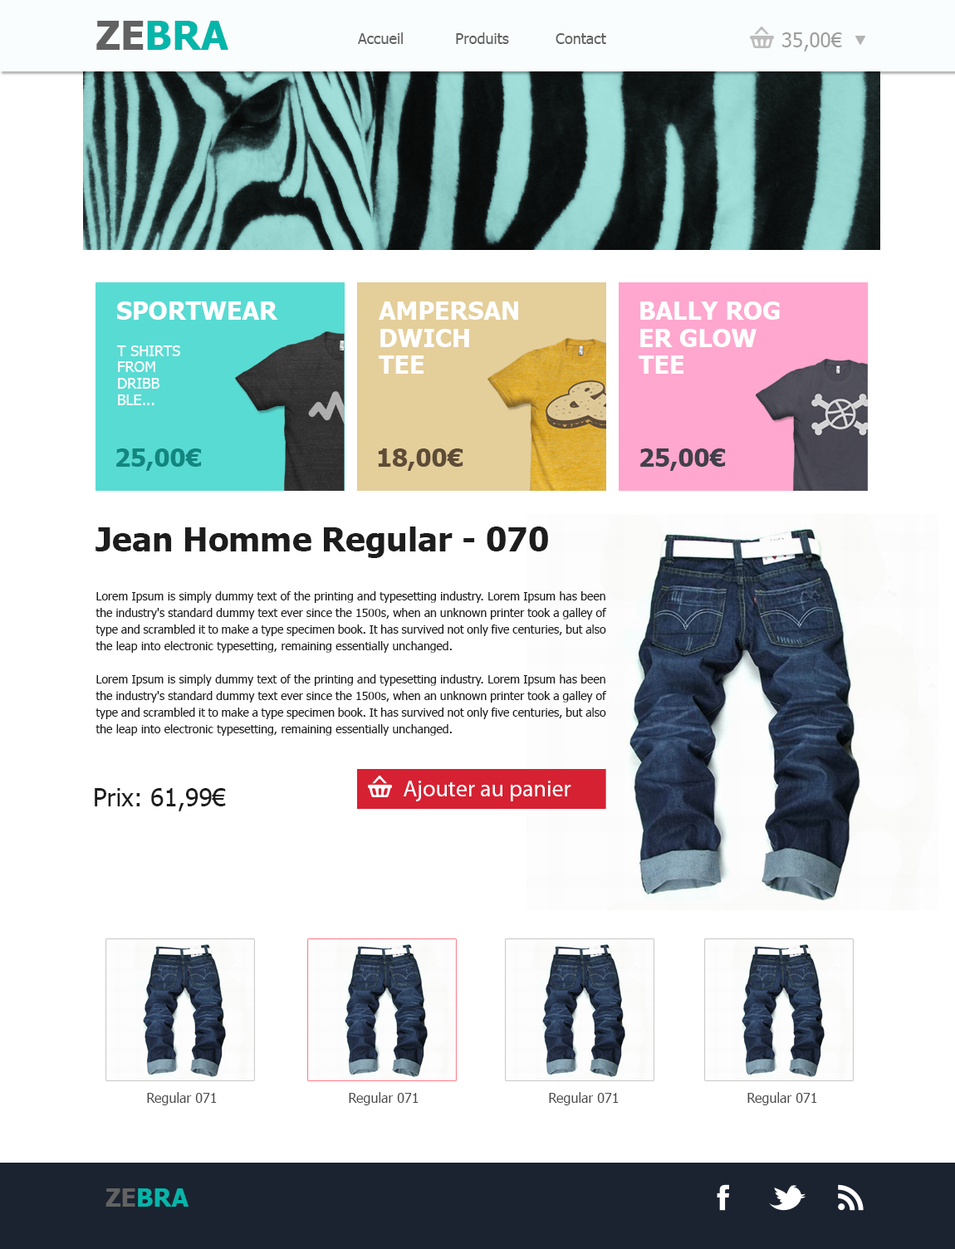
<style>
.page{position:relative;width:955px;height:1249px;background:#ffffff}
.page>*{position:absolute;margin:0}
.t1{font:39.9px "Tahoma-Bold";color:#06b5a9}
.t2{font:39.9px "Tahoma-Bold";color:#626262}
.t3{font:15px "Tahoma";color:#626262}
.t4{font:20px "Tahoma";color:#9d9d9d}
.t5{font:24.9px "Tahoma-Bold";color:#ffffff;text-transform:uppercase}
.t6{font:24.9px/27.2px "Tahoma-Bold";color:#ffffff;text-transform:uppercase}
.t7{font:14.9px/16.4px "Tahoma";color:#ffffff;text-transform:uppercase}
.t8{font:24.9px "Tahoma-Bold";color:#12867f;text-transform:uppercase}
.t9{font:24.9px "Tahoma-Bold";color:#5e4c38;text-transform:uppercase}
.t10{font:24.9px "Tahoma-Bold";color:#414049;text-transform:uppercase}
.t11{font:33.2px "Tahoma-Bold";color:#1d1d1d}
.t12{font:11.7px/16.6px "Tahoma";color:#1d1d1d}
.t13{font:23.3px "MyriadPro-Regular";color:#ffffff}
.t14{font:24.9px "Tahoma";color:#1d1d1d}
.t15{font:13.3px "Tahoma";color:#4c4c4c}
.t16{font:24.9px "Tahoma-Bold";color:#06b5a9}
.t17{font:24.9px "Tahoma-Bold";color:#626262}
</style>
<div class="page">
<p class="t1" style="left:96px;top:21px;width:132px;height:29px"><span class="t2">ZE</span>BRA</p>
<p class="t3" style="left:358px;top:32px;width:248px;height:12px">Accueil           Produits          Contact</p>
<p class="t4" style="left:782px;top:32px;width:60px;height:19px">35,00€</p>
<p class="t5" style="left:117px;top:301px;width:161px;height:19px">SportWear</p>
<p class="t6" style="left:379px;top:301px;width:139px;height:73px">Ampersan<br>dwich <br>Tee</p>
<p class="t6" style="left:639px;top:301px;width:141px;height:73px">Bally Rog<br>er Glow <br>Tee</p>
<p class="t7" style="left:116px;top:345px;width:64px;height:60px">T shirts<br>from <br>dribb<br>ble...</p>
<p class="t8" style="left:116px;top:448px;width:86px;height:23px">25,00€</p>
<p class="t9" style="left:378px;top:448px;width:85px;height:23px">18,00€</p>
<p class="t10" style="left:640px;top:448px;width:86px;height:23px">25,00€</p>
<p class="t11" style="left:95px;top:526px;width:453px;height:32px">Jean Homme Regular - 070</p>
<p class="t12" style="left:95px;top:591px;width:512px;height:145px;text-align:justify">Lorem Ipsum is simply dummy text of the printing and typesetting industry. Lorem Ipsum has been the industry's standard dummy text ever since the 1500s, when an unknown printer took a galley of type and scrambled it to make a type specimen book. It has survived not only five centuries, but also the leap into electronic typesetting, remaining essentially unchanged.<br><br>Lorem Ipsum is simply dummy text of the printing and typesetting industry. Lorem Ipsum has been the industry's standard dummy text ever since the 1500s, when an unknown printer took a galley of type and scrambled it to make a type specimen book. It has survived not only five centuries, but also the leap into electronic typesetting, remaining essentially unchanged.<br><br><br><br><br>in the 1960s with the release of Letraset sheets containing Lorem Ipsum passages, and more recently with desktop publishing software like Aldus PageMaker including versions of Lorem Ipsum.</p>
<p class="t13" style="left:404px;top:780px;width:167px;height:21px">Ajouter au panier</p>
<p class="t14" style="left:95px;top:788px;width:131px;height:23px">Prix: 61,99€</p>
<p class="t15" style="left:147px;top:1092px;width:70px;height:13px">Regular 071</p>
<p class="t15" style="left:349px;top:1092px;width:69px;height:13px">Regular 071</p>
<p class="t15" style="left:549px;top:1092px;width:70px;height:13px">Regular 071</p>
<p class="t15" style="left:747px;top:1092px;width:70px;height:13px">Regular 071</p>
<p class="t16" style="left:105px;top:1188px;width:83px;height:18px"><span class="t17">ZE</span>BRA</p>
</div>
